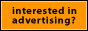
<style>
.page{position:relative;width:88px;height:31px;background:#ff9600}
.page>*{position:absolute;margin:0}
.t1{font:10px/9.5px "MyriadMM";letter-spacing:0.04em;color:#000000}
</style>
<div class="page">
<p class="t1" style="left:12px;top:6px;width:65px;height:20px">interested in<br>advertising?</p>
</div>
